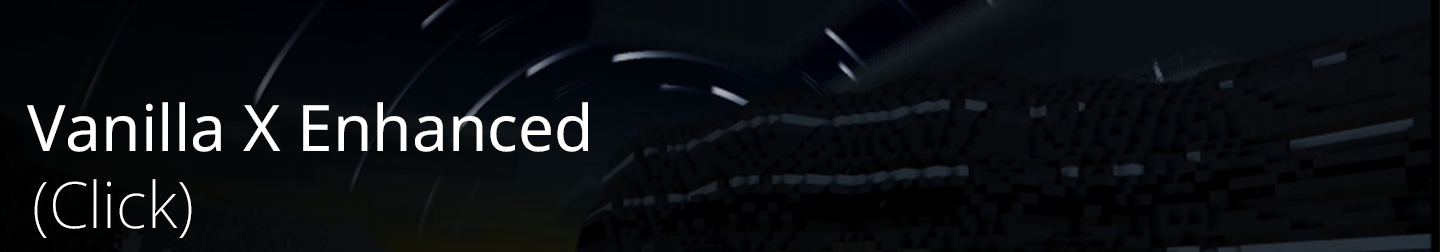
<style>
.page{position:relative;width:1440px;height:252px}
.page>*{position:absolute;margin:0}
.t1{font:64px "NotoSans-Regular";color:#ffffff}
.t2{font:64px "NotoSans-ExtraLight";color:#ffffff}
</style>
<div class="page">
<p class="t1" style="left:27px;top:102px;width:561px;height:50px">Vanilla X Enhanced</p>
<p class="t2" style="left:34px;top:179px;width:158px;height:59px">(Click)</p>
</div>
